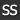
<style>
.page{position:relative;width:20px;height:20px;background:#333333}
.page>*{position:absolute;margin:0}
.t1{font:14px "Tahoma";color:#ffffff}
</style>
<div class="page">
<p class="t1" style="left:2px;top:4px;width:16px;height:12px">SS</p>
</div>
